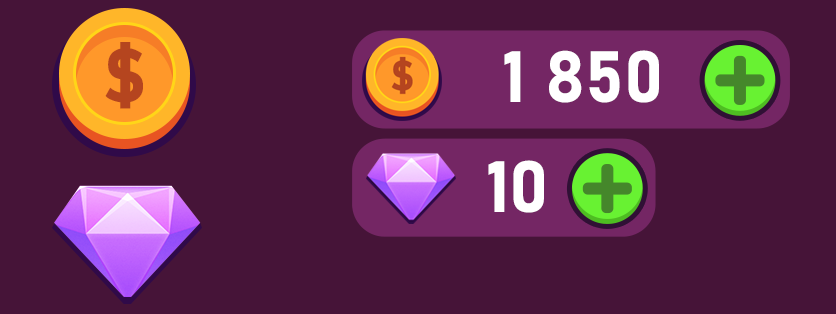
<style>
.page{position:relative;width:836px;height:314px;background:#461438}
.page>*{position:absolute;margin:0}
.t1{font:75.1px "Bahnschrift-Bold";color:#b5451f}
.t2{font:71.4px "Bahnschrift-Bold";color:#ffffff}
</style>
<div class="page">
<p class="t1" style="left:105px;top:42px;width:38px;height:67px">$</p>
<p class="t2" style="left:504px;top:50px;width:155px;height:53px">1 850</p>
<p class="t2" style="left:488px;top:160px;width:56px;height:53px">10</p>
</div>
